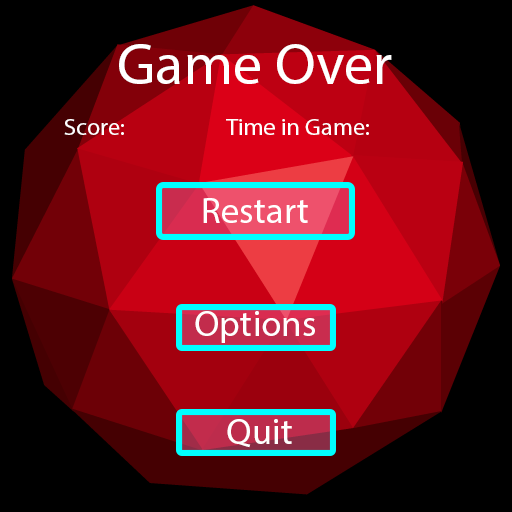
<style>
.page{position:relative;width:512px;height:512px;background:#000000}
.page>*{position:absolute;margin:0}
.t1{font:58px "MyriadPro-Regular";color:#ffffff}
.t2{font:23.9px "MyriadPro-Regular";color:#ffffff}
.t3{font:36.6px "MyriadPro-Regular";color:#ffffff}
</style>
<div class="page">
<p class="t1" style="left:119px;top:44px;width:273px;height:40px">Game Over</p>
<p class="t2" style="left:64px;top:119px;width:60px;height:16px">Score:</p>
<p class="t2" style="left:226px;top:119px;width:143px;height:16px">Time in Game:</p>
<p class="t3" style="left:203px;top:198px;width:105px;height:25px">Restart</p>
<p class="t3" style="left:195px;top:311px;width:120px;height:32px">Options</p>
<p class="t3" style="left:227px;top:419px;width:65px;height:29px">Quit</p>
</div>
